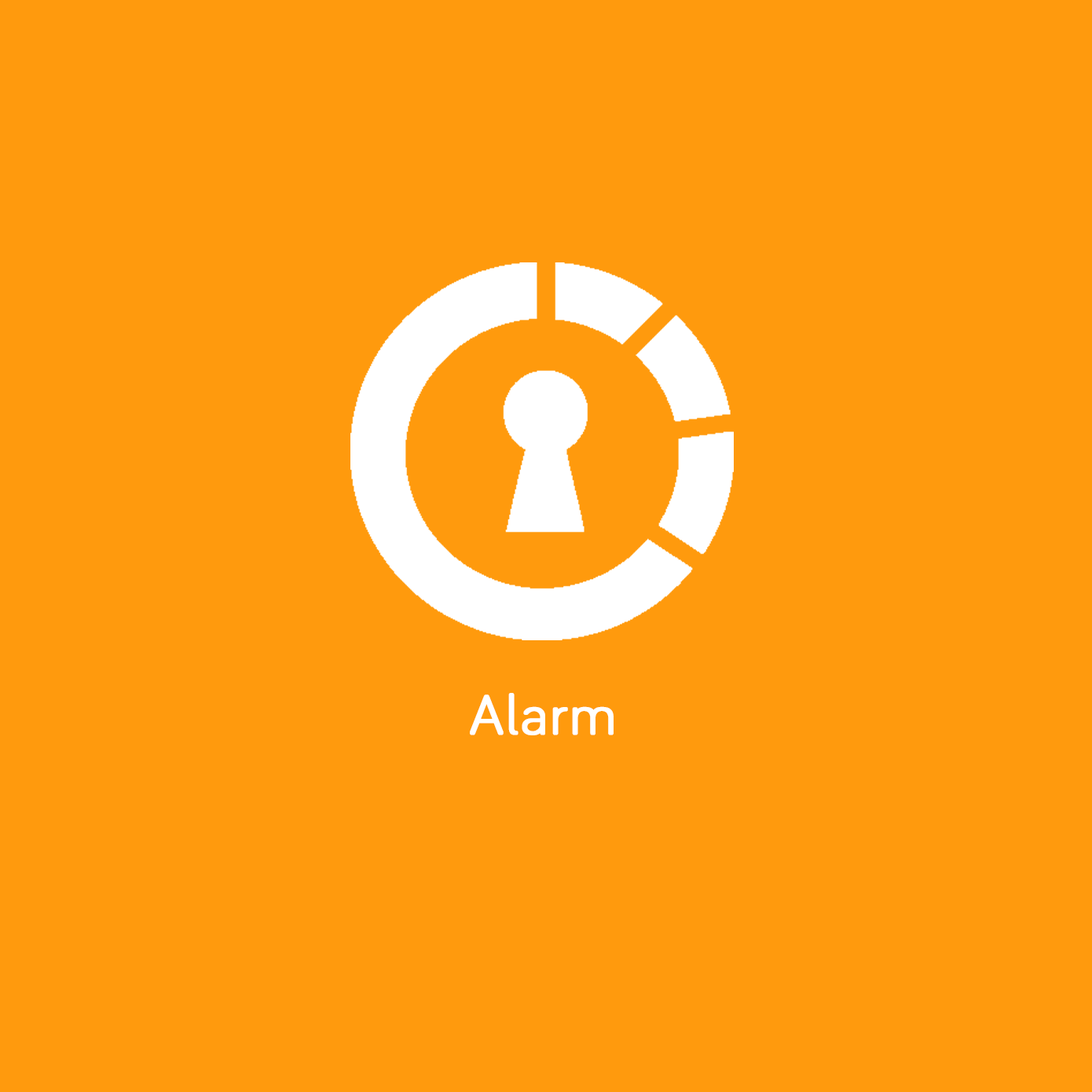
<style>
.page{position:relative;width:1092px;height:1092px;background:#ff9a0d}
.page>*{position:absolute;margin:0}
.t1{font:57.3px "Bariol-Regular";letter-spacing:0.01em;color:#ffffff;font-weight:bold}
</style>
<div class="page">
<p class="t1" style="left:470px;top:693px;width:144px;height:42px">Alarm</p>
</div>
